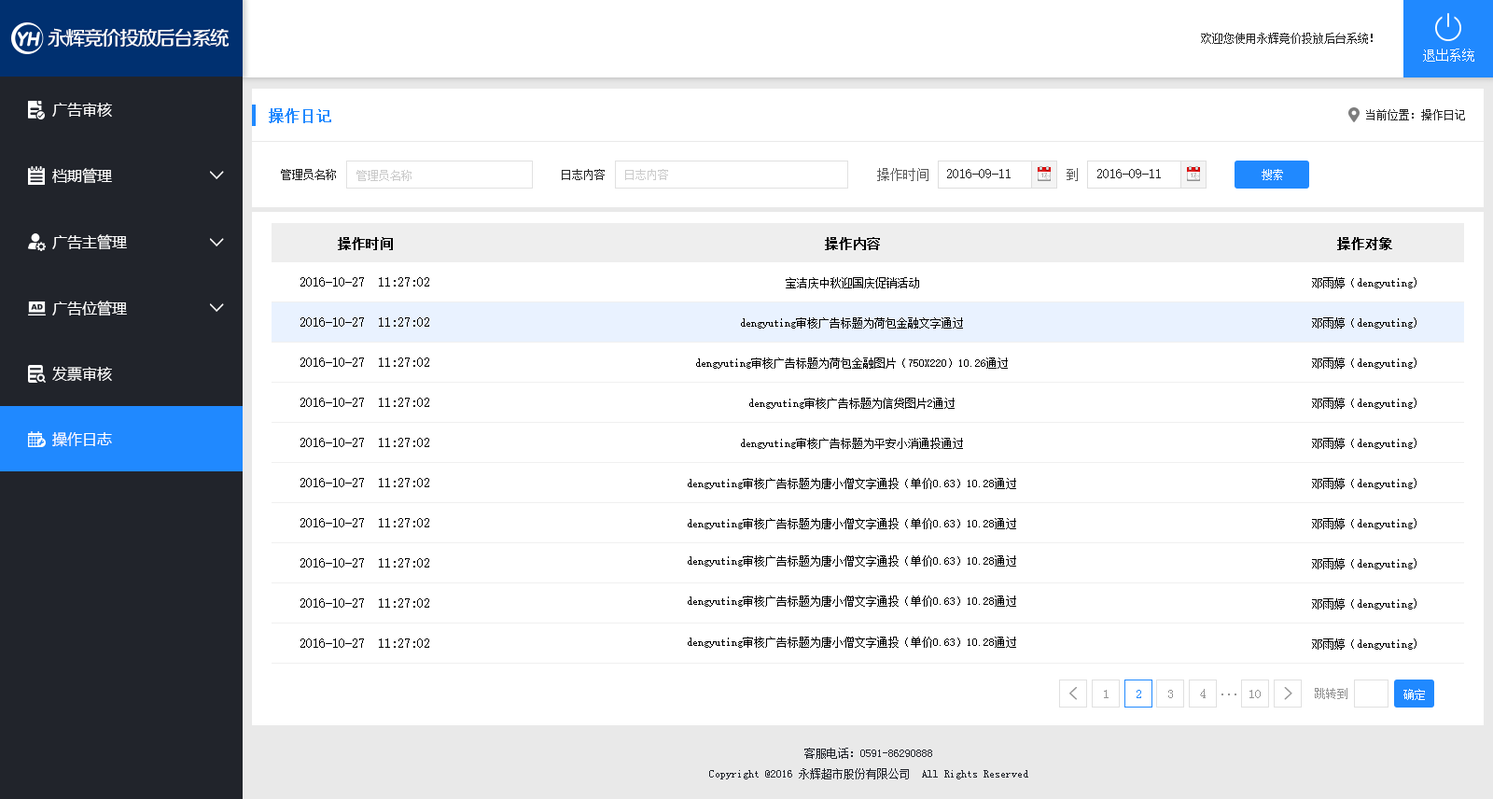
<style>
.page{position:relative;width:1493px;height:799px;background:#ffffff}
.page>*{position:absolute;margin:0}
.t1{font:19.8px "FZZZHUNHJW--GB1-0";letter-spacing:-0.1em;color:#ffffff}
.t2{font:11.2px "SimSun";color:#252525}
.t3{font:13.1px "SimSun";color:#ffffff}
.t4{font:14.9px "MicrosoftYaHei";color:#ffffff}
.t5{font:14.9px "SimSun";color:#2089ff;font-weight:bold}
.t6{font:18.7px "SimSun";color:#ffffff;font-weight:bold;scale:1.04 1}
.t7{font:11.2px "SimSun";color:#cbcbcb}
.t8{font:13.1px "SimSun";color:#5a5a5a}
.t9{font:13.1px "SimSun";color:#252525}
.t10{font:11.2px "SimSun";color:#ffffff}
.t11{font:13.1px "SimSun";color:#000000;font-weight:bold}
.t12{font:13.1px "SimSun";color:#000000}
.t13{font:11.2px "SimSun";color:#000000}
.t14{font:18.7px "SimSun";color:#949494;font-weight:bold}
.t15{font:13.1px "SimSun";color:#949494}
.t16{font:13.1px "SimSun";color:#2089ff}
.t17{font:11.2px "SimSun";color:#949494}
.t18{font:11.2px "SimSun";color:#21242b}
</style>
<div class="page">
<p class="t1" style="left:48px;top:28px;width:181px;height:20px">永辉竞价投放后台系统</p>
<p class="t2" style="left:1201px;top:33px;width:172px;height:11px">欢迎您使用永辉竞价投放后台系统！</p>
<p class="t3" style="left:1423px;top:49px;width:51px;height:13px">退出系统</p>
<p class="t4" style="left:52px;top:103px;width:60px;height:14px">广告审核</p>
<p class="t5" style="left:269px;top:108px;width:62px;height:15px">操作日记</p>
<p class="t2" style="left:1366px;top:109px;width:99px;height:11px">当前位置：操作日记</p>
<p class="t4" style="left:52px;top:168px;width:60px;height:16px">档期管理</p>
<p class="t6" style="left:210px;top:171px;width:14px;height:8px;rotate:90deg">&gt;</p>
<p class="t2" style="left:281px;top:169px;width:55px;height:11px">管理员名称</p>
<p class="t7" style="left:356px;top:170px;width:55px;height:11px">管理员名称</p>
<p class="t2" style="left:562px;top:169px;width:43px;height:11px">日志内容</p>
<p class="t7" style="left:625px;top:169px;width:43px;height:11px">日志内容</p>
<p class="t8" style="left:877px;top:168px;width:51px;height:13px">操作时间</p>
<p class="t9" style="left:947px;top:169px;width:64px;height:9px">2016-09-11</p>
<p class="t8" style="left:1067px;top:168px;width:11px;height:13px">到</p>
<p class="t9" style="left:1097px;top:169px;width:64px;height:9px">2016-09-11</p>
<p class="t10" style="left:1262px;top:169px;width:21px;height:11px">搜索</p>
<p class="t4" style="left:52px;top:234px;width:75px;height:16px">广告主管理</p>
<p class="t6" style="left:210px;top:238px;width:14px;height:8px;rotate:90deg">&gt;</p>
<p class="t11" style="left:338px;top:237px;width:55px;height:13px">操作时间</p>
<p class="t11" style="left:825px;top:237px;width:55px;height:13px">操作内容</p>
<p class="t11" style="left:1337px;top:237px;width:55px;height:13px">操作对象</p>
<p class="t12" style="left:300px;top:277px;width:129px;height:9px">2016-10-27  11:27:02</p>
<p class="t13" style="left:786px;top:277px;width:133px;height:11px">宝洁庆中秋迎国庆促销活动</p>
<p class="t13" style="left:1312px;top:277px;width:104px;height:11px">邓雨婷（dengyuting)</p>
<p class="t4" style="left:52px;top:300px;width:75px;height:16px">广告位管理</p>
<p class="t6" style="left:210px;top:303px;width:14px;height:9px;rotate:90deg">&gt;</p>
<p class="t12" style="left:300px;top:317px;width:129px;height:10px">2016-10-27  11:27:02</p>
<p class="t13" style="left:741px;top:317px;width:222px;height:11px">dengyuting审核广告标题为荷包金融文字通过</p>
<p class="t13" style="left:1312px;top:317px;width:104px;height:11px">邓雨婷（dengyuting)</p>
<p class="t12" style="left:300px;top:357px;width:129px;height:10px">2016-10-27  11:27:02</p>
<p class="t13" style="left:696px;top:357px;width:312px;height:12px">dengyuting审核广告标题为荷包金融图片（750X220）10.26通过</p>
<p class="t13" style="left:1312px;top:357px;width:104px;height:12px">邓雨婷（dengyuting)</p>
<p class="t4" style="left:52px;top:367px;width:60px;height:14px">发票审核</p>
<p class="t12" style="left:300px;top:397px;width:129px;height:10px">2016-10-27  11:27:02</p>
<p class="t13" style="left:749px;top:397px;width:206px;height:12px">dengyuting审核广告标题为信贷图片2通过</p>
<p class="t13" style="left:1312px;top:397px;width:104px;height:12px">邓雨婷（dengyuting)</p>
<p class="t4" style="left:52px;top:432px;width:60px;height:15px">操作日志</p>
<p class="t12" style="left:300px;top:438px;width:129px;height:9px">2016-10-27  11:27:02</p>
<p class="t13" style="left:741px;top:438px;width:222px;height:11px">dengyuting审核广告标题为平安小消通投通过</p>
<p class="t13" style="left:1312px;top:438px;width:104px;height:11px">邓雨婷（dengyuting)</p>
<p class="t12" style="left:300px;top:478px;width:129px;height:9px">2016-10-27  11:27:02</p>
<p class="t13" style="left:688px;top:478px;width:328px;height:11px">dengyuting审核广告标题为唐小僧文字通投（单价0.63）10.28通过</p>
<p class="t13" style="left:1312px;top:478px;width:104px;height:11px">邓雨婷（dengyuting)</p>
<p class="t12" style="left:300px;top:518px;width:129px;height:9px">2016-10-27  11:27:02</p>
<p class="t13" style="left:688px;top:518px;width:328px;height:11px">dengyuting审核广告标题为唐小僧文字通投（单价0.63）10.28通过</p>
<p class="t13" style="left:1312px;top:518px;width:104px;height:11px">邓雨婷（dengyuting)</p>
<p class="t12" style="left:300px;top:558px;width:129px;height:9px">2016-10-27  11:27:02</p>
<p class="t13" style="left:688px;top:555px;width:328px;height:11px">dengyuting审核广告标题为唐小僧文字通投（单价0.63）10.28通过</p>
<p class="t13" style="left:1312px;top:558px;width:104px;height:11px">邓雨婷（dengyuting)</p>
<p class="t12" style="left:300px;top:598px;width:129px;height:9px">2016-10-27  11:27:02</p>
<p class="t13" style="left:688px;top:595px;width:328px;height:12px">dengyuting审核广告标题为唐小僧文字通投（单价0.63）10.28通过</p>
<p class="t13" style="left:1312px;top:598px;width:104px;height:11px">邓雨婷（dengyuting)</p>
<p class="t12" style="left:300px;top:638px;width:129px;height:10px">2016-10-27  11:27:02</p>
<p class="t13" style="left:688px;top:636px;width:328px;height:12px">dengyuting审核广告标题为唐小僧文字通投（单价0.63）10.28通过</p>
<p class="t13" style="left:1312px;top:638px;width:104px;height:11px">邓雨婷（dengyuting)</p>
<p class="t14" style="left:1069px;top:687px;width:8px;height:13px;rotate:180deg">&gt;</p>
<p class="t15" style="left:1104px;top:690px;width:5px;height:8px">1</p>
<p class="t16" style="left:1136px;top:690px;width:5px;height:8px">2</p>
<p class="t15" style="left:1168px;top:690px;width:5px;height:8px">3</p>
<p class="t15" style="left:1200px;top:689px;width:6px;height:9px">4</p>
<p class="t15" style="left:1249px;top:690px;width:12px;height:8px">10</p>
<p class="t14" style="left:1284px;top:687px;width:8px;height:13px">&gt;</p>
<p class="t17" style="left:1315px;top:688px;width:32px;height:11px">跳转到</p>
<p class="t10" style="left:1403px;top:689px;width:22px;height:11px">确定</p>
<p class="t15" style="left:1221px;top:693px;width:15px;height:2px">...</p>
<p class="t18" style="left:804px;top:747px;width:128px;height:12px">客服电话：0591-86290888</p>
<p class="t18" style="left:709px;top:768px;width:319px;height:11px">Copyright @2016 永辉超市股份有限公司  All Rights Reserved</p>
</div>
